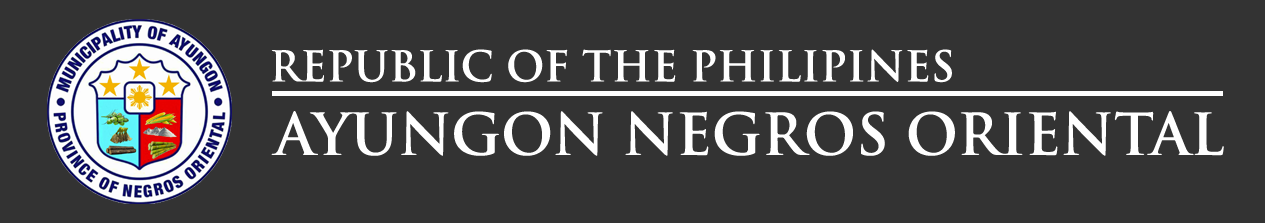
<style>
.page{position:relative;width:1265px;height:223px;background:#333333}
.page>*{position:absolute;margin:0}
.t1{font:41.3px "TrajanPro-Bold";color:#ffffff}
.t2{font:56.3px "TrajanPro-Bold";color:#ffffff}
</style>
<div class="page">
<p class="t1" style="left:271px;top:49px;width:681px;height:34px">REPUBLIC OF THE PHILIPINES</p>
<p class="t2" style="left:271px;top:111px;width:953px;height:45px">AYUNGON NEGROS ORIENTAL</p>
</div>
